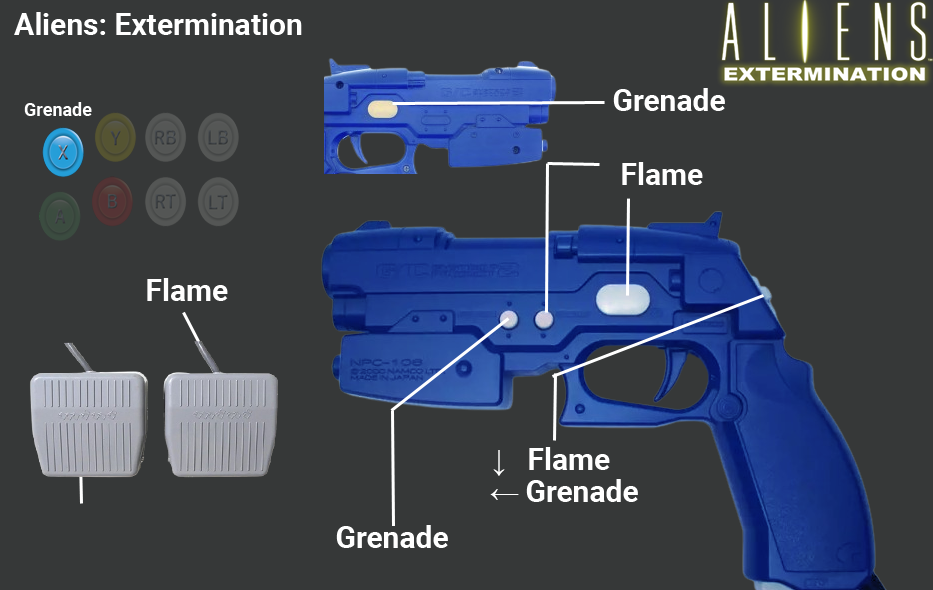
<style>
.page{position:relative;width:933px;height:590px;background:#363838}
.page>*{position:absolute;margin:0}
.t1{font:30px "Roboto-Bold";color:#ffffff}
.t2{font:18px "Roboto-Bold";color:#ffffff}
.t3{font:30px "MicrosoftSansSerif";color:#ffffff}
</style>
<div class="page">
<p class="t1" style="left:14px;top:12px;width:288px;height:23px">Aliens: Extermination</p>
<p class="t1" style="left:613px;top:88px;width:112px;height:23px">Grenade</p>
<p class="t2" style="left:24px;top:102px;width:68px;height:14px">Grenade</p>
<p class="t1" style="left:622px;top:162px;width:81px;height:23px">Flame</p>
<p class="t1" style="left:147px;top:278px;width:81px;height:23px">Flame</p>
<p class="t1" style="left:493px;top:447px;width:117px;height:29px"><span class="t3">↓ </span>Flame</p>
<p class="t1" style="left:490px;top:479px;width:148px;height:23px"><span class="t3">← </span>Grenade</p>
<p class="t1" style="left:336px;top:525px;width:112px;height:23px">Grenade</p>
</div>
